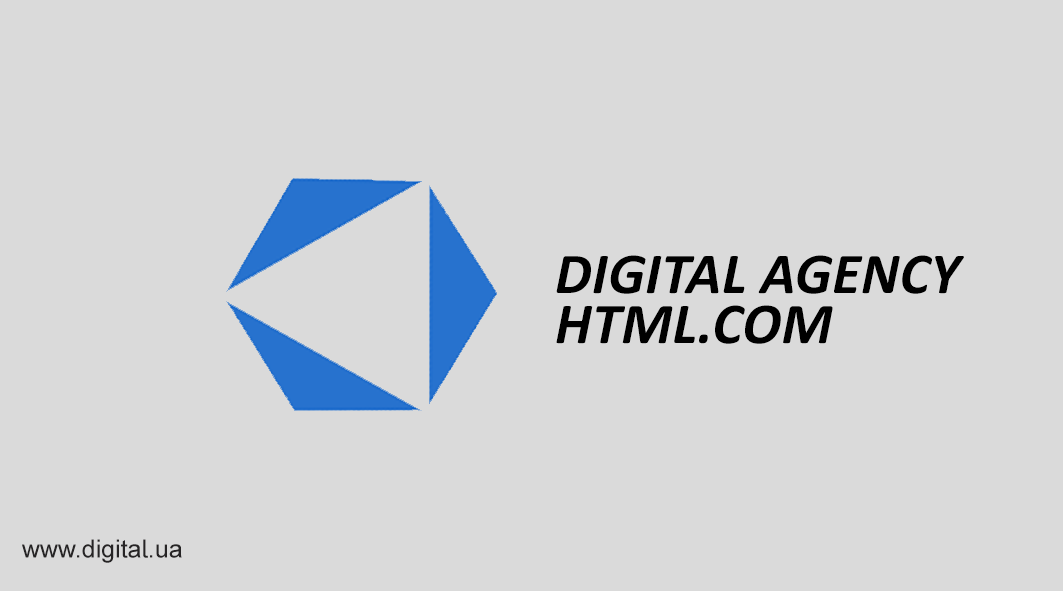
<style>
.page{position:relative;width:1063px;height:591px;background:#dadada}
.page>*{position:absolute;margin:0}
.t1{font:58.3px/50px "Calibri-BoldItalic";letter-spacing:0.005em;color:#000000}
.t2{font:25px "ArialMT";color:#262425}
</style>
<div class="page">
<p class="t1" style="left:556px;top:255px;width:408px;height:89px">DIGITAL AGENCY<br>HTML.COM</p>
<p class="t2" style="left:22px;top:539px;width:160px;height:24px">www.digital.ua</p>
</div>
